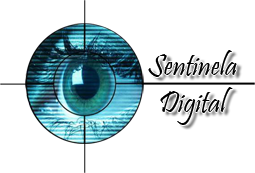
<style>
.page{position:relative;width:255px;height:173px;background:#ffffff}
.page>*{position:absolute;margin:0}
.t1{font:31px "Pristina-Regular";color:#000000;scale:0.97 1}
</style>
<div class="page">
<p class="t1" style="left:148px;top:50px;width:89px;height:75px;text-align:center">Sentinela<br>Digital</p>
</div>
